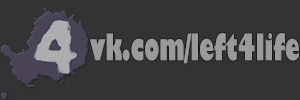
<style>
.page{position:relative;width:300px;height:100px;background:#333333}
.page>*{position:absolute;margin:0}
.t1{font:35.7px "GillSans-UltraBold";color:#9a9a9a;scale:0.59 1}
</style>
<div class="page">
<p class="t1" style="left:90px;top:33px;width:209px;height:31px">vk.com/left4life</p>
</div>
